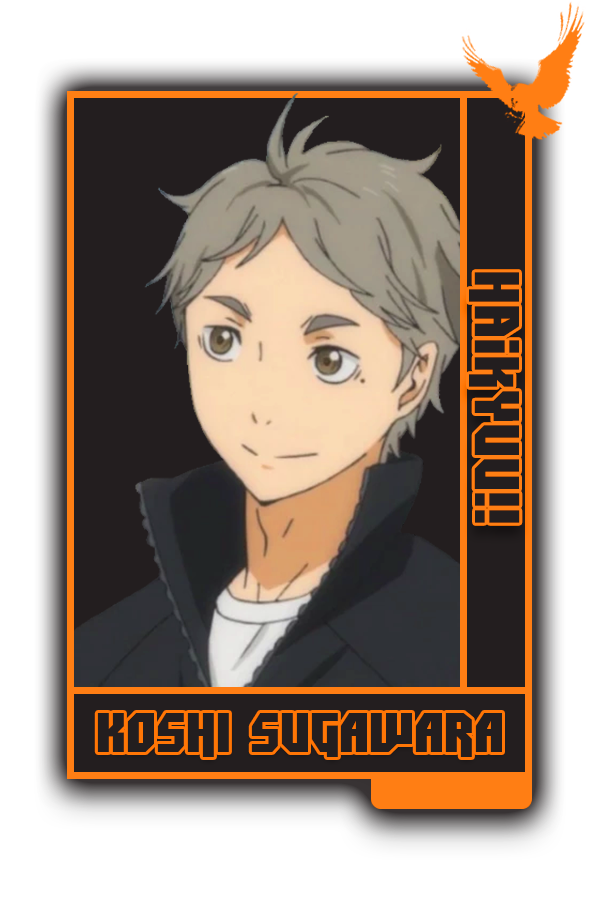
<style>
.page{position:relative;width:600px;height:900px;background:#ffffff}
.page>*{position:absolute;margin:0}
.t1{font:62.9px "Dimitri";color:#231f20}
.t2{font:55.4px "Dimitri";color:#231f20}
</style>
<div class="page">
<p class="t1" style="left:469px;top:272px;width:51px;height:251px;rotate:90deg">Haikyuu!!</p>
<p class="t2" style="left:97px;top:713px;width:405px;height:44px">KOSHI SUGAWARA</p>
</div>
